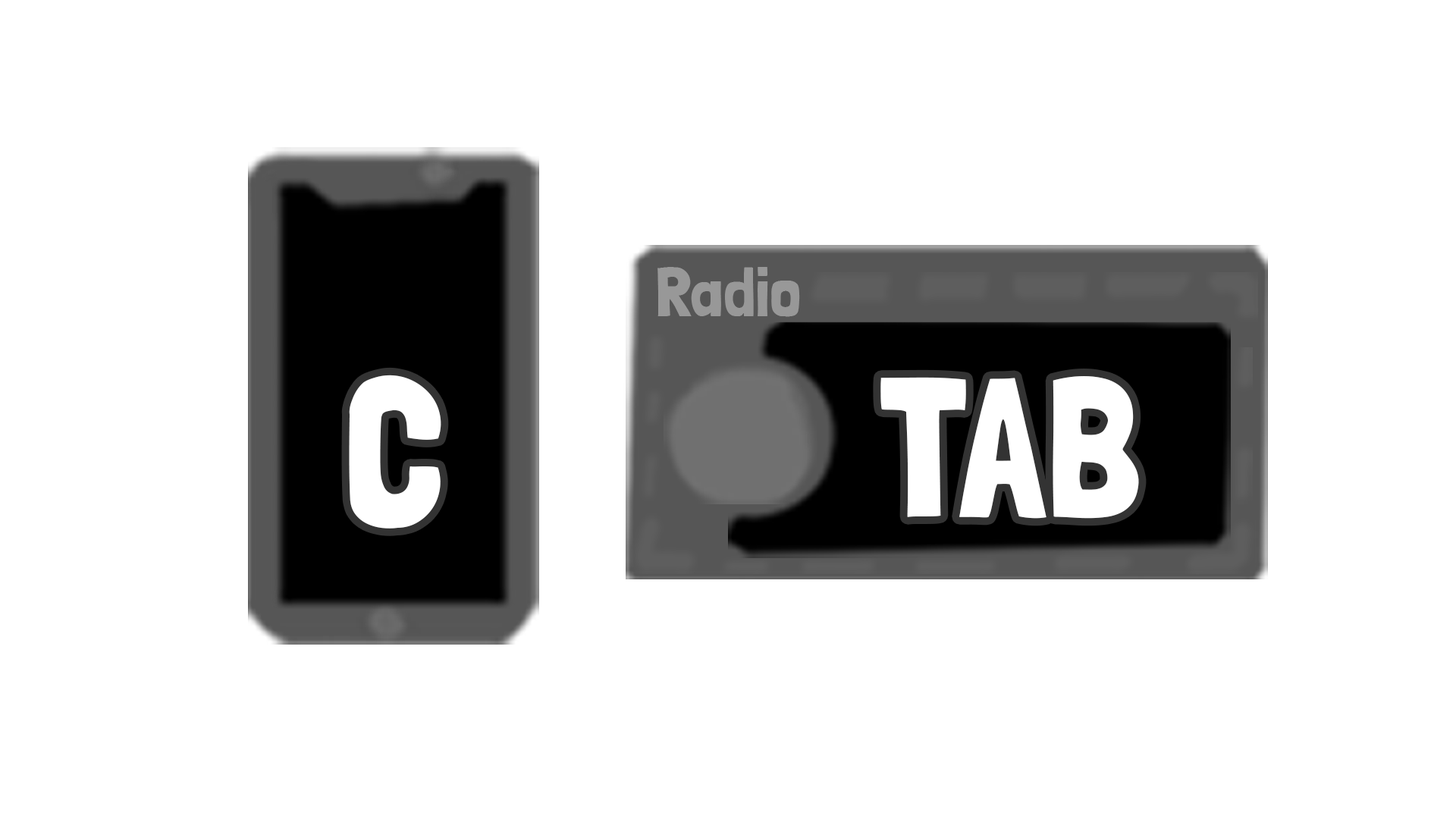
<style>
.page{position:relative;width:1456px;height:819px;background:#ffffff}
.page>*{position:absolute;margin:0}
.t1{font:69.5px "LondrinaSolid-Regular";color:#989898}
.t2{font:206.8px "LondrinaSolid-Regular";color:#ffffff}
.t3{font:197.4px "LondrinaSolid-Regular";color:#ffffff}
</style>
<div class="page">
<p class="t1" style="left:657px;top:267px;width:143px;height:50px">Radio</p>
<p class="t2" style="left:349px;top:375px;width:92px;height:154px">C</p>
<p class="t3" style="left:880px;top:376px;width:259px;height:143px">TAB</p>
</div>
